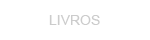
<style>
.page{position:relative;width:150px;height:40px;background:#ffffff}
.page>*{position:absolute;margin:0}
.t1{font:14px "ArialMT";color:#cccccc}
</style>
<div class="page">
<p class="t1" style="left:49px;top:15px;width:51px;height:10px">LIVROS</p>
</div>
